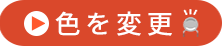
<style>
.page{position:relative;width:222px;height:46px;background:#da482b}
.page>*{position:absolute;margin:0}
.t1{font:26px "NotoSansCJKjp-Medium";letter-spacing:0.18em;color:#ffffff}
</style>
<div class="page">
<p class="t1" style="left:55px;top:11px;width:117px;height:25px">色を変更</p>
</div>
